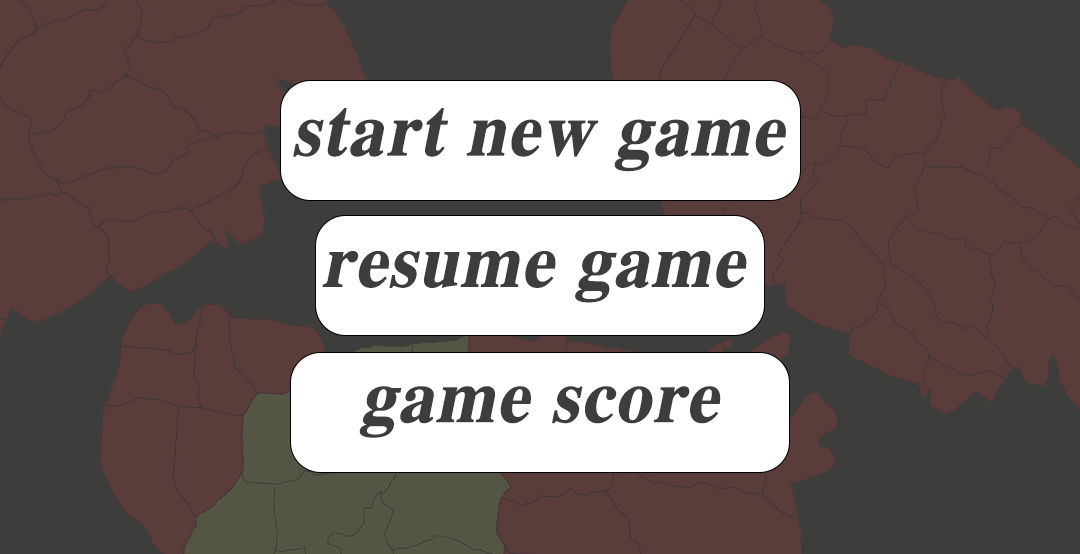
<style>
.page{position:relative;width:1080px;height:554px;background:#5a3c3b}
.page>*{position:absolute;margin:0}
.t1{font:89.2px "IRFarnaz";color:#3d3d3c;font-weight:bold;scale:0.95 1}
</style>
<div class="page">
<p class="t1" style="left:293px;top:108px;width:493px;height:64px">start new game</p>
<p class="t1" style="left:322px;top:251px;width:425px;height:52px">resume game</p>
<p class="t1" style="left:359px;top:386px;width:362px;height:52px">game score</p>
</div>
